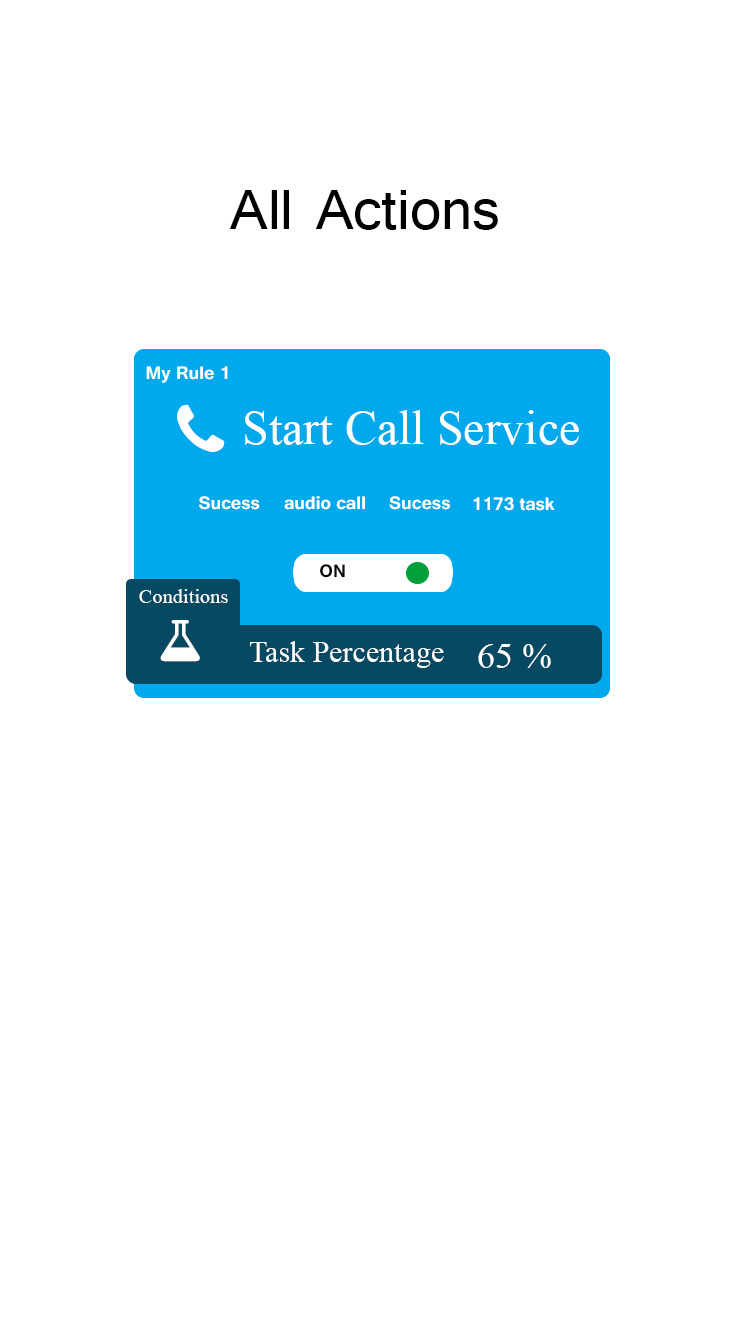
<style>
.page{position:relative;width:750px;height:1334px;background:#ffffff}
.page>*{position:absolute;margin:0}
.t1{font:72px "Tunga";color:#000000}
.t2{font:22.5px "Tunga-Bold";color:#ffffff}
.t3{font:48px "TimesNewRomanPSMT";color:#ffffff}
.t4{font:22.5px "Tunga-Bold";color:#0b060a}
.t5{font:20.4px "TimesNewRomanPSMT";color:#ffffff}
.t6{font:30px "TimesNewRomanPSMT";color:#ffffff}
.t7{font:36px "TimesNewRomanPSMT";color:#ffffff}
</style>
<div class="page">
<p class="t1" style="left:229px;top:190px;width:269px;height:40px">All Actions</p>
<p class="t2" style="left:146px;top:366px;width:82px;height:17px">My Rule 1</p>
<p class="t3" style="left:245px;top:410px;width:334px;height:35px">Start Call Service</p>
<p class="t2" style="left:199px;top:496px;width:61px;height:14px">Sucess</p>
<p class="t2" style="left:284px;top:496px;width:81px;height:14px">audio call</p>
<p class="t2" style="left:389px;top:496px;width:61px;height:14px">Sucess</p>
<p class="t2" style="left:473px;top:497px;width:82px;height:14px">1173 task</p>
<p class="t4" style="left:320px;top:564px;width:25px;height:14px">ON</p>
<p class="t5" style="left:139px;top:589px;width:89px;height:14px">Conditions</p>
<p class="t6" style="left:250px;top:641px;width:194px;height:27px">Task Percentage</p>
<p class="t7" style="left:478px;top:644px;width:73px;height:24px">65 %</p>
</div>
